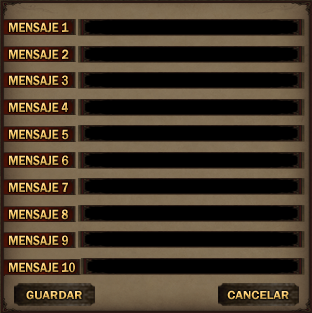
<style>
.page{position:relative;width:312px;height:313px;background:#000000}
.page>*{position:absolute;margin:0}
.t1{font:14px/26.7px "FranklinGothic-Demi";scale:0.86 1}
.t2{font:12px "FranklinGothic-Demi";scale:1.07 1}
</style>
<div class="page">
<p class="t1" style="left:9px;top:22px;width:66px;height:251px">MENSAJE 1<br>MENSAJE 2<br>MENSAJE 3<br>MENSAJE 4<br>MENSAJE 5<br>MENSAJE 6<br>MENSAJE 7<br>MENSAJE 8<br>MENSAJE 9<br>MENSAJE 10</p>
<p class="t2" style="left:26px;top:290px;width:56px;height:10px">GUARDAR</p>
<p class="t2" style="left:227px;top:290px;width:62px;height:10px">CANCELAR</p>
</div>
